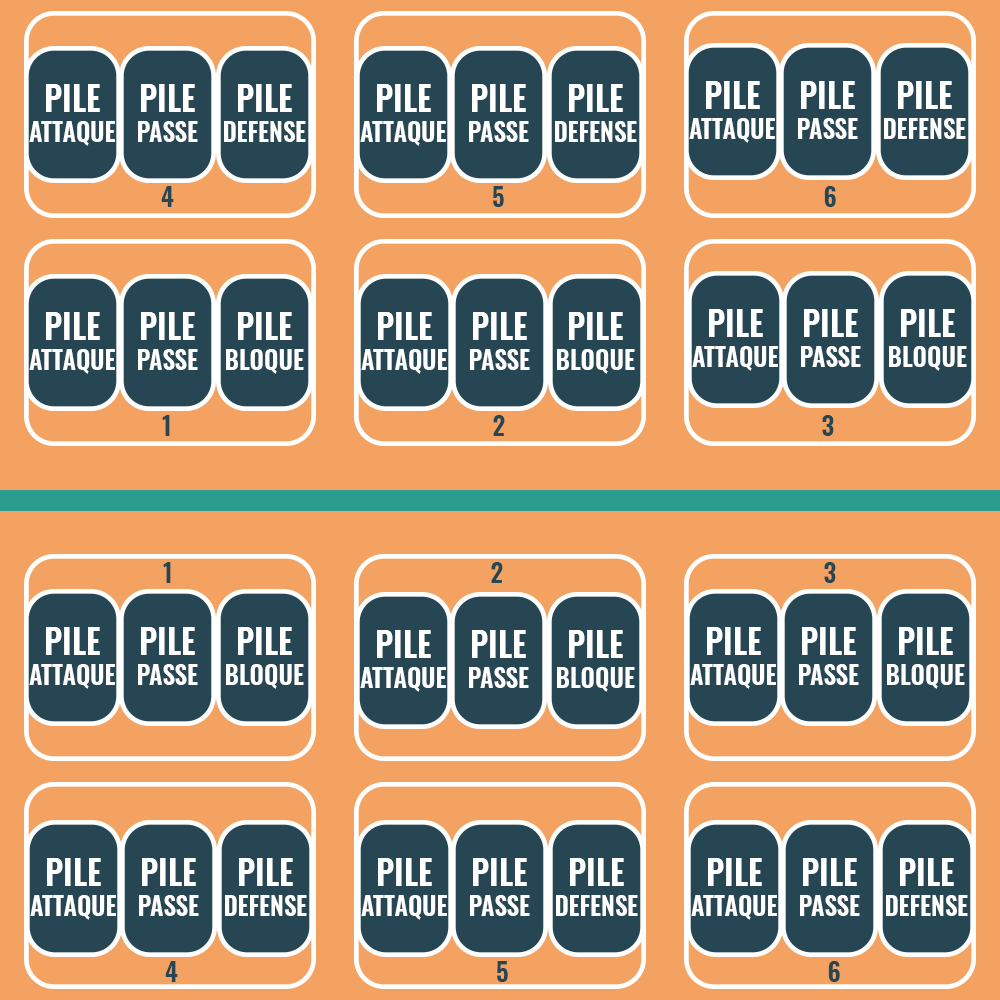
<style>
.page{position:relative;width:1000px;height:1000px;background:#f4a261}
.page>*{position:absolute;margin:0}
.t1{font:25px "Oswald-SemiBold";color:#ffffff}
.t2{font:33.3px "Oswald-SemiBold";color:#ffffff}
.t3{font:25px "Oswald-SemiBold";color:#264653}
</style>
<div class="page">
<p class="t1" style="left:29px;top:84px;width:86px;height:62px;text-align:center"><span class="t2">PILE<br></span>ATTAQUE</p>
<p class="t1" style="left:138px;top:84px;width:60px;height:58px;text-align:center"><span class="t2">PILE<br></span>PASSE</p>
<p class="t1" style="left:224px;top:84px;width:82px;height:58px;text-align:center"><span class="t2">PILE<br></span>DEFENSE</p>
<p class="t1" style="left:360px;top:84px;width:86px;height:62px;text-align:center"><span class="t2">PILE<br></span>ATTAQUE</p>
<p class="t1" style="left:469px;top:84px;width:60px;height:58px;text-align:center"><span class="t2">PILE<br></span>PASSE</p>
<p class="t1" style="left:555px;top:84px;width:82px;height:58px;text-align:center"><span class="t2">PILE<br></span>DEFENSE</p>
<p class="t1" style="left:689px;top:81px;width:86px;height:62px;text-align:center"><span class="t2">PILE<br></span>ATTAQUE</p>
<p class="t1" style="left:798px;top:81px;width:60px;height:58px;text-align:center"><span class="t2">PILE<br></span>PASSE</p>
<p class="t1" style="left:884px;top:81px;width:82px;height:58px;text-align:center"><span class="t2">PILE<br></span>DEFENSE</p>
<p class="t3" style="left:161px;top:186px;width:13px;height:21px">4</p>
<p class="t3" style="left:493px;top:186px;width:11px;height:21px">5</p>
<p class="t3" style="left:824px;top:186px;width:12px;height:21px">6</p>
<p class="t1" style="left:29px;top:312px;width:86px;height:62px;text-align:center"><span class="t2">PILE<br></span>ATTAQUE</p>
<p class="t1" style="left:138px;top:312px;width:60px;height:58px;text-align:center"><span class="t2">PILE<br></span>PASSE</p>
<p class="t1" style="left:226px;top:312px;width:78px;height:62px;text-align:center"><span class="t2">PILE<br></span>BLOQUE</p>
<p class="t1" style="left:361px;top:312px;width:86px;height:62px;text-align:center"><span class="t2">PILE<br></span>ATTAQUE</p>
<p class="t1" style="left:470px;top:312px;width:60px;height:58px;text-align:center"><span class="t2">PILE<br></span>PASSE</p>
<p class="t1" style="left:557px;top:312px;width:78px;height:62px;text-align:center"><span class="t2">PILE<br></span>BLOQUE</p>
<p class="t1" style="left:692px;top:309px;width:86px;height:62px;text-align:center"><span class="t2">PILE<br></span>ATTAQUE</p>
<p class="t1" style="left:801px;top:309px;width:60px;height:58px;text-align:center"><span class="t2">PILE<br></span>PASSE</p>
<p class="t1" style="left:889px;top:309px;width:78px;height:62px;text-align:center"><span class="t2">PILE<br></span>BLOQUE</p>
<p class="t3" style="left:162px;top:415px;width:8px;height:21px">1</p>
<p class="t3" style="left:493px;top:415px;width:12px;height:21px">2</p>
<p class="t3" style="left:822px;top:415px;width:12px;height:21px">3</p>
<p class="t3" style="left:163px;top:562px;width:8px;height:21px">1</p>
<p class="t3" style="left:491px;top:562px;width:12px;height:21px">2</p>
<p class="t3" style="left:824px;top:562px;width:12px;height:21px">3</p>
<p class="t1" style="left:29px;top:627px;width:86px;height:62px;text-align:center"><span class="t2">PILE<br></span>ATTAQUE</p>
<p class="t1" style="left:138px;top:627px;width:60px;height:58px;text-align:center"><span class="t2">PILE<br></span>PASSE</p>
<p class="t1" style="left:226px;top:627px;width:78px;height:62px;text-align:center"><span class="t2">PILE<br></span>BLOQUE</p>
<p class="t1" style="left:360px;top:630px;width:86px;height:62px;text-align:center"><span class="t2">PILE<br></span>ATTAQUE</p>
<p class="t1" style="left:469px;top:630px;width:60px;height:58px;text-align:center"><span class="t2">PILE<br></span>PASSE</p>
<p class="t1" style="left:557px;top:630px;width:78px;height:62px;text-align:center"><span class="t2">PILE<br></span>BLOQUE</p>
<p class="t1" style="left:690px;top:627px;width:86px;height:62px;text-align:center"><span class="t2">PILE<br></span>ATTAQUE</p>
<p class="t1" style="left:799px;top:627px;width:60px;height:58px;text-align:center"><span class="t2">PILE<br></span>PASSE</p>
<p class="t1" style="left:887px;top:627px;width:78px;height:62px;text-align:center"><span class="t2">PILE<br></span>BLOQUE</p>
<p class="t1" style="left:30px;top:858px;width:86px;height:62px;text-align:center"><span class="t2">PILE<br></span>ATTAQUE</p>
<p class="t1" style="left:139px;top:858px;width:60px;height:58px;text-align:center"><span class="t2">PILE<br></span>PASSE</p>
<p class="t1" style="left:225px;top:858px;width:82px;height:58px;text-align:center"><span class="t2">PILE<br></span>DEFENSE</p>
<p class="t1" style="left:361px;top:858px;width:86px;height:62px;text-align:center"><span class="t2">PILE<br></span>ATTAQUE</p>
<p class="t1" style="left:470px;top:858px;width:60px;height:58px;text-align:center"><span class="t2">PILE<br></span>PASSE</p>
<p class="t1" style="left:556px;top:858px;width:82px;height:58px;text-align:center"><span class="t2">PILE<br></span>DEFENSE</p>
<p class="t1" style="left:691px;top:858px;width:86px;height:62px;text-align:center"><span class="t2">PILE<br></span>ATTAQUE</p>
<p class="t1" style="left:800px;top:858px;width:60px;height:58px;text-align:center"><span class="t2">PILE<br></span>PASSE</p>
<p class="t1" style="left:886px;top:858px;width:82px;height:58px;text-align:center"><span class="t2">PILE<br></span>DEFENSE</p>
<p class="t3" style="left:165px;top:961px;width:13px;height:21px">4</p>
<p class="t3" style="left:497px;top:961px;width:11px;height:21px">5</p>
<p class="t3" style="left:828px;top:961px;width:12px;height:21px">6</p>
</div>
